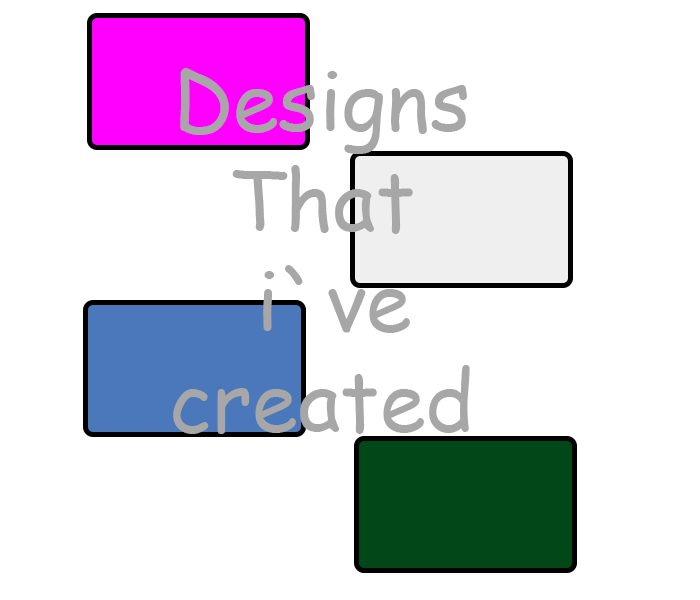
<style>
.page{position:relative;width:700px;height:600px;background:#ffffff}
.page>*{position:absolute;margin:0}
.t1{font:83.3px "ComicSansMS";color:#a7a7a7}
</style>
<div class="page">
<p class="t1" style="left:173px;top:68px;width:297px;height:366px;text-align:center">Designs<br>That<br> i`ve<br>created</p>
</div>
